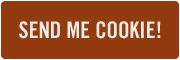
<style>
.page{position:relative;width:180px;height:60px;background:#933a0e}
.page>*{position:absolute;margin:0}
.t1{font:22.7px "TradeGothicLT-BoldCondTwenty";color:#edece7;text-transform:uppercase}
</style>
<div class="page">
<p class="t1" style="left:19px;top:21px;width:142px;height:18px">Send me cookie!</p>
</div>
